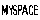
<style>
.page{position:relative;width:40px;height:20px;background:#ffffff}
.page>*{position:absolute;margin:0}
.t1{font:10.2px "TopSecretRegularSWFTE";color:#000000}
</style>
<div class="page">
<p class="t1" style="left:2px;top:5px;width:36px;height:10px">MYSPACE</p>
</div>
